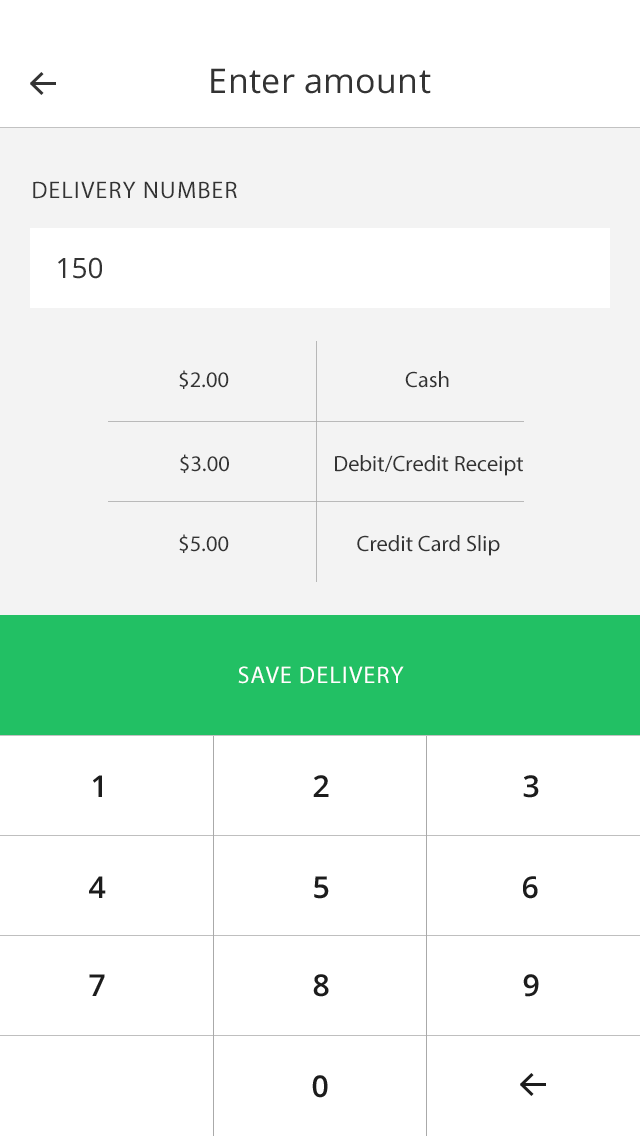
<style>
.page{position:relative;width:640px;height:1136px;background:#ffffff}
.page>*{position:absolute;margin:0}
.t1{font:34px "OpenSans";letter-spacing:0.01em;color:#333333}
.t2{font:24px "MyriadPro-Regular";letter-spacing:0.05em;color:#333333;text-transform:uppercase}
.t3{font:28px "OpenSans";color:#333333}
.t4{font:22.4px "MyriadPro-Regular";color:#333333}
.t5{font:24px "MyriadPro-Regular";letter-spacing:0.05em;color:#ffffff;text-transform:uppercase}
.t6{font:30px "OpenSans-Semibold";letter-spacing:0.05em;color:#1c1c1c;text-transform:uppercase}
</style>
<div class="page">
<p class="t1" style="left:211px;top:68px;width:220px;height:26px">Enter amount</p>
<p class="t2" style="left:33px;top:181px;width:204px;height:18px">Delivery number</p>
<p class="t3" style="left:58px;top:257px;width:44px;height:22px">150</p>
<p class="t4" style="left:179px;top:370px;width:50px;height:19px">$2.00</p>
<p class="t4" style="left:405px;top:371px;width:44px;height:17px">Cash</p>
<p class="t4" style="left:180px;top:454px;width:49px;height:19px">$3.00</p>
<p class="t4" style="left:335px;top:455px;width:188px;height:21px">Debit/Credit Receipt</p>
<p class="t4" style="left:179px;top:534px;width:50px;height:19px">$5.00</p>
<p class="t4" style="left:357px;top:535px;width:143px;height:21px">Credit Card Slip</p>
<p class="t5" style="left:238px;top:666px;width:166px;height:18px">save delivery</p>
<p class="t6" style="left:93px;top:775px;width:9px;height:22px">1</p>
<p class="t6" style="left:313px;top:775px;width:16px;height:22px">2</p>
<p class="t6" style="left:523px;top:775px;width:16px;height:23px">3</p>
<p class="t6" style="left:89px;top:876px;width:17px;height:22px">4</p>
<p class="t6" style="left:314px;top:876px;width:15px;height:23px">5</p>
<p class="t6" style="left:523px;top:876px;width:15px;height:23px">6</p>
<p class="t6" style="left:89px;top:974px;width:16px;height:22px">7</p>
<p class="t6" style="left:313px;top:974px;width:16px;height:23px">8</p>
<p class="t6" style="left:523px;top:974px;width:16px;height:23px">9</p>
<p class="t6" style="left:312px;top:1075px;width:16px;height:23px">0</p>
</div>
